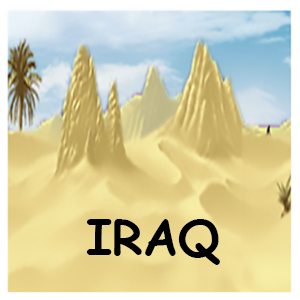
<style>
.page{position:relative;width:300px;height:300px}
.page>*{position:absolute;margin:0}
.t1{font:48px "ComicSansMS-Bold";color:#000000}
</style>
<div class="page">
<p class="t1" style="left:87px;top:219px;width:133px;height:46px">IRAQ</p>
</div>
